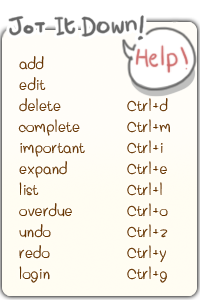
<style>
.page{position:relative;width:200px;height:300px;background:#fffdf8}
.page>*{position:absolute;margin:0}
.t1{font:25px/21px "Pahnto";color:#663300}
</style>
<div class="page">
<p class="t1" style="left:18px;top:56px;width:152px;height:227px">add<br>edit<br>delete  Ctrl+d<br>complete  Ctrl+m<br>important  Ctrl+i<br>expand  Ctrl+e<br>list   Ctrl+l<br>overdue  Ctrl+o<br>undo   Ctrl+z<br>redo   Ctrl+y<br>login   Ctrl+g</p>
</div>
